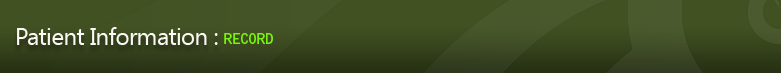
<style>
.page{position:relative;width:781px;height:73px}
.page>*{position:absolute;margin:0}
.t1{font:24px "SegoeUI";letter-spacing:-0.025em;color:#faf7f5}
.t2{font:14px "BellGothicStd-Bold";letter-spacing:-0.05em;color:#7af40e}
</style>
<div class="page">
<p class="t1" style="left:17px;top:27px;width:201px;height:18px">Patient Information :</p>
<p class="t2" style="left:224px;top:33px;width:49px;height:11px">RECORD</p>
</div>
